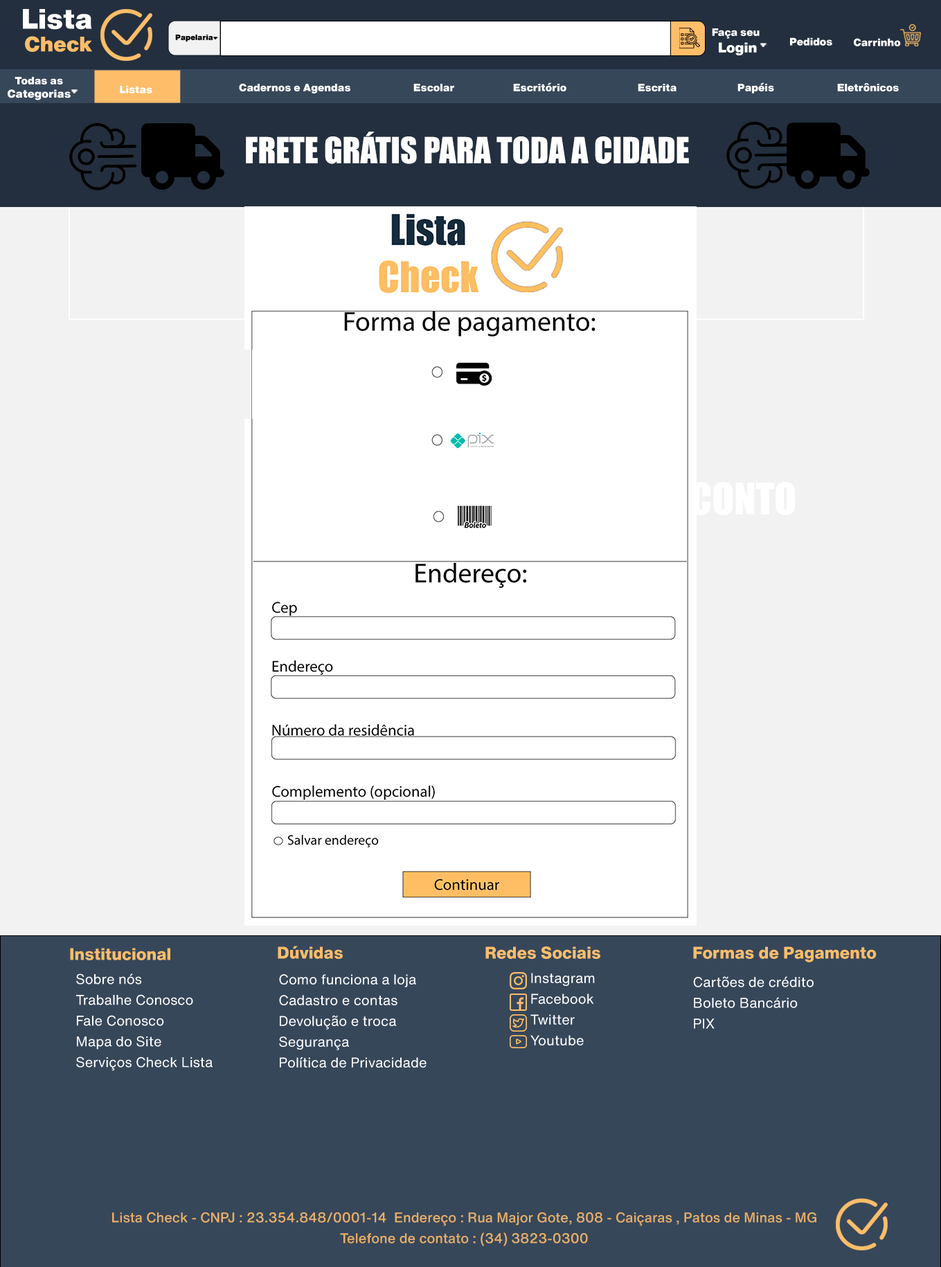
<style>
.page{position:relative;width:941px;height:1267px;background:#f2f2f2}
.page>*{position:absolute;margin:0}
.t1{font:27.7px "HelveticaNowText-Black";color:#ffffff}
.t2{font:10.4px "HelveticaNowText-Black";color:#ffffff}
.t3{font:13.8px "HelveticaNowText-Black";color:#ffffff}
.t4{font:20.8px "HelveticaNowText-Black";color:#febd69}
.t5{font:7.6px "HelveticaNowText-Black";color:#000000}
.t6{font:11.1px "HelveticaNowText-Black";color:#ffffff}
.t7{font:33.2px "Impact";color:#ffffff}
.t8{font:16.6px "HelveticaNowText-ExtraBold";color:#febd69}
.t9{font:13.8px/20.8px "HelveticaNowText-Regular";color:#ffffff}
.t10{font:13.8px/20.8px "HelveticaNowText-Medium";color:#e7ae67}
</style>
<div class="page">
<p class="t1" style="left:23px;top:9px;width:69px;height:21px">Lista</p>
<p class="t2" style="left:712px;top:28px;width:48px;height:27px;text-align:center">Faça seu<br><span class="t3"> Login</span></p>
<p class="t4" style="left:25px;top:36px;width:67px;height:16px">Check</p>
<p class="t5" style="left:175px;top:35px;width:38px;height:7px">Papelaria</p>
<p class="t2" style="left:790px;top:37px;width:42px;height:9px">Pedidos</p>
<p class="t2" style="left:854px;top:38px;width:47px;height:8px">Carrinho</p>
<p class="t6" style="left:8px;top:77px;width:63px;height:23px;text-align:center"><span class="t2">Todas as<br></span>Categorias</p>
<p class="t2" style="left:120px;top:85px;width:32px;height:8px">Listas</p>
<p class="t2" style="left:239px;top:82px;width:660px;height:11px">Cadernos e Agendas   Escolar   Escritório   Escrita   Papéis   Eletrônicos</p>
<p class="t7" style="left:246px;top:132px;width:443px;height:32px">FRETE GRÁTIS PARA TODA A CIDADE</p>
<p class="t8" style="left:70px;top:948px;width:100px;height:12px">Institucional</p>
<p class="t8" style="left:278px;top:946px;width:65px;height:13px">Dúvidas</p>
<p class="t8" style="left:485px;top:947px;width:115px;height:12px">Redes Sociais</p>
<p class="t8" style="left:693px;top:947px;width:184px;height:15px">Formas de Pagamento</p>
<p class="t9" style="left:76px;top:974px;width:137px;height:97px;text-align:justify">Sobre nós<br>Trabalhe Conosco<br>Fale Conosco<br>Mapa do Site<br>Serviços Check Lista</p>
<p class="t9" style="left:279px;top:974px;width:148px;height:94px;text-align:justify">Como funciona a loja<br>Cadastro e contas<br>Devolução e troca<br>Segurança<br>Política de Privacidade</p>
<p class="t9" style="left:530px;top:973px;width:65px;height:73px;text-align:justify">Instagram<br>Facebook<br>Twitter<br>Youtube</p>
<p class="t9" style="left:693px;top:976px;width:121px;height:53px;text-align:justify">Cartões de crédito<br>Boleto Bancário<br>PIX</p>
<p class="t10" style="left:112px;top:1212px;width:704px;height:34px;text-align:center">Lista Check - CNPJ : 23.354.848/0001-14  Endereço : Rua Major Gote, 808 - Caiçaras , Patos de Minas - MG<br>Telefone de contato : (34) 3823-0300</p>
</div>
